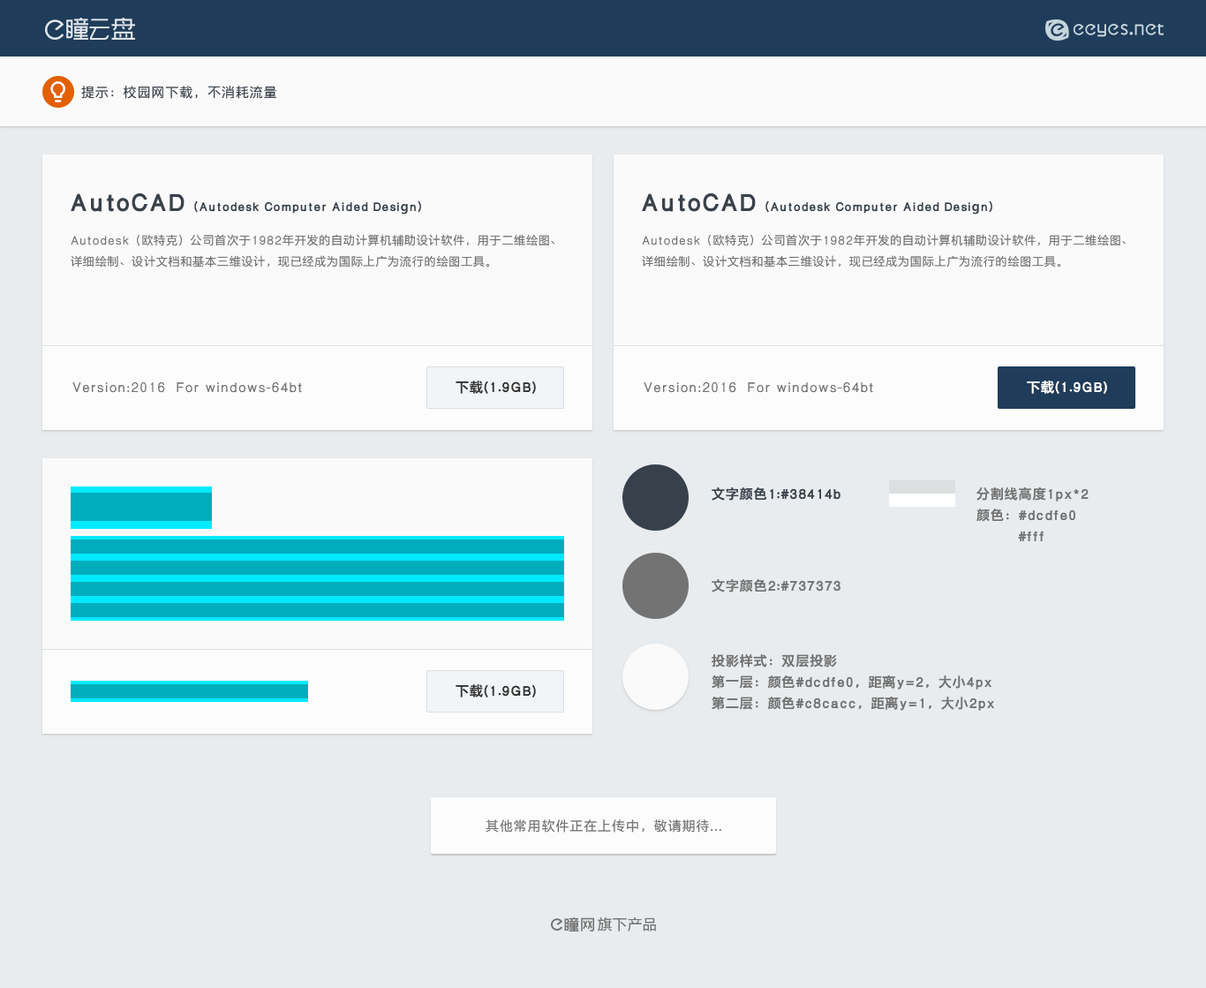
<style>
.page{position:relative;width:1206px;height:988px;background:#e9ecee}
.page>*{position:absolute;margin:0}
.t1{font:15.9px "PingHei-Text";letter-spacing:0.05em;color:#38414b}
.t2{font:14.1px "PingHei-Bold";letter-spacing:0.05em;color:#38414b}
.t3{font:28.3px "PingHei-Bold";letter-spacing:0.05em;color:#38414b}
.t4{font:14.1px/21.2px "PingHei-Text";letter-spacing:0.05em;color:#737373}
.t5{font:15.9px "PingHei-Text";letter-spacing:0.05em;color:#717171}
.t6{font:15.9px "PingHei-Bold";letter-spacing:0.05em;color:#333333}
.t7{font:15.9px "PingHei-Bold";letter-spacing:0.05em;color:#ffffff}
.t8{font:15.9px "PingHei-Bold";letter-spacing:0.05em;color:#38414b}
.t9{font:15.9px/21.2px "PingHei-Bold";letter-spacing:0.05em;color:#737373}
.t10{font:15.9px "PingHei-Bold";letter-spacing:0.05em;color:#737373}
.t11{font:15.9px "PingHei-Text";letter-spacing:0.05em;color:#737373}
.t12{font:17.7px "PingHei-Text";letter-spacing:0.05em;color:#737373}
</style>
<div class="page">
<p class="t1" style="left:81px;top:86px;width:196px;height:13px">提示：校园网下载，不消耗流量</p>
<p class="t2" style="left:71px;top:193px;width:350px;height:22px"><span class="t3">AutoCAD</span>（Autodesk Computer Aided Design）</p>
<p class="t2" style="left:642px;top:193px;width:351px;height:22px"><span class="t3">AutoCAD</span>（Autodesk Computer Aided Design）</p>
<p class="t4" style="left:71px;top:234px;width:484px;height:34px">Autodesk（欧特克）公司首次于1982年开发的自动计算机辅助设计软件，用于二维绘图、详细绘制、设计文档和基本三维设计，现已经成为国际上广为流行的绘图工具。</p>
<p class="t4" style="left:642px;top:234px;width:484px;height:34px">Autodesk（欧特克）公司首次于1982年开发的自动计算机辅助设计软件，用于二维绘图、详细绘制、设计文档和基本三维设计，现已经成为国际上广为流行的绘图工具。</p>
<p class="t5" style="left:72px;top:382px;width:230px;height:11px">Version:2016  For windows-64bt</p>
<p class="t6" style="left:456px;top:381px;width:80px;height:13px">下载(1.9GB)</p>
<p class="t5" style="left:644px;top:382px;width:230px;height:11px">Version:2016  For windows-64bt</p>
<p class="t7" style="left:1027px;top:381px;width:81px;height:13px">下载(1.9GB)</p>
<p class="t8" style="left:712px;top:488px;width:129px;height:13px">文字颜色1:#38414b</p>
<p class="t9" style="left:977px;top:488px;width:112px;height:53px">分割线高度1px*2<br>颜色：#dcdfe0<br>        #fff</p>
<p class="t10" style="left:712px;top:579px;width:129px;height:14px">文字颜色2:#737373</p>
<p class="t9" style="left:712px;top:654px;width:283px;height:57px">投影样式：双层投影<br>第一层：颜色#dcdfe0，距离y=2，大小4px<br>第二层：颜色#c8cacc，距离y=1，大小2px</p>
<p class="t6" style="left:456px;top:685px;width:80px;height:13px">下载(1.9GB)</p>
<p class="t11" style="left:486px;top:820px;width:236px;height:13px">其他常用软件正在上传中，敬请期待...</p>
<p class="t12" style="left:598px;top:918px;width:58px;height:14px">旗下产品</p>
</div>
